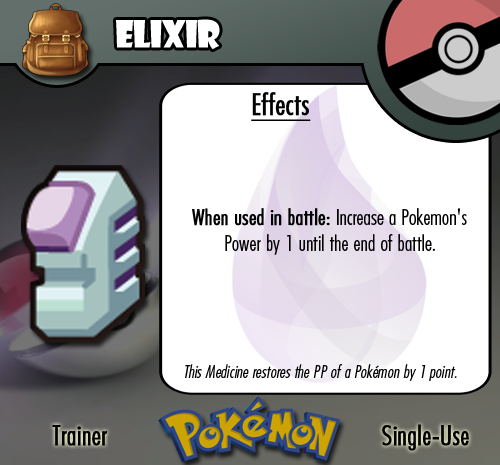
<style>
.page{position:relative;width:500px;height:465px;background:#ffffff}
.page>*{position:absolute;margin:0}
.t1{font:36.7px "ShowcardGothic-Reg";letter-spacing:-0.025em;color:#ffffff;scale:0.91 1}
.t2{font:22.2px "FuturaCondensedBQ-Light";color:#010101}
.t3{font:27.8px "FuturaCondensedBQ-Light";color:#010101;font-weight:bold}
.t4{font:30.6px "FuturaCondensedBQ-Light";color:#010101;font-weight:bold;text-decoration:underline}
.t5{font:22.2px "FuturaCondensedBQ-Light";color:#010101;font-weight:bold}
.t6{font:18.1px "FuturaCondensedBQ-Light";color:#010101;font-style:italic}
</style>
<div class="page">
<p class="t1" style="left:116px;top:19px;width:104px;height:31px">Elixir</p>
<p class="t2" style="left:192px;top:92px;width:275px;height:163px"><span class="t3">  </span><span class="t4">Effects<br><br><br><br><br><br><br></span><span class="t5">When used in battle: </span>Increase a Pokemon's Power by 1 until the end of battle.</p>
<p class="t6" style="left:185px;top:364px;width:272px;height:17px">This Medicine restores the PP of a Pokémon by 1 point.</p>
<p class="t3" style="left:52px;top:425px;width:55px;height:21px">Trainer</p>
<p class="t3" style="left:382px;top:424px;width:87px;height:27px">Single-Use</p>
</div>
